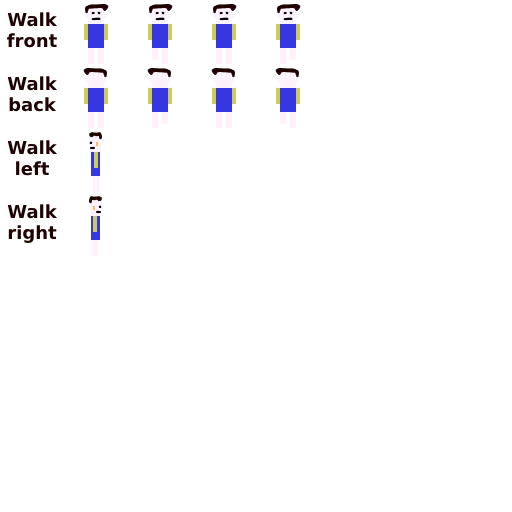
<style>
.page{position:relative;width:512px;height:512px;background:#ffffff}
.page>*{position:absolute;margin:0}
.t1{font:18px "DejaVuSans-Bold";color:#200202}
.t2{font:18px "DejaVuSans-Bold";color:#ffbc53}
</style>
<div class="page">
<p class="t1" style="left:7px;top:12px;width:51px;height:36px;text-align:center">Walk front</p>
<p class="t1" style="left:7px;top:76px;width:51px;height:36px;text-align:center">Walk back</p>
<p class="t1" style="left:7px;top:140px;width:51px;height:36px;text-align:center"><span class="t2">W</span>alk left</p>
<p class="t1" style="left:7px;top:204px;width:51px;height:39px;text-align:center">Walk right</p>
</div>
